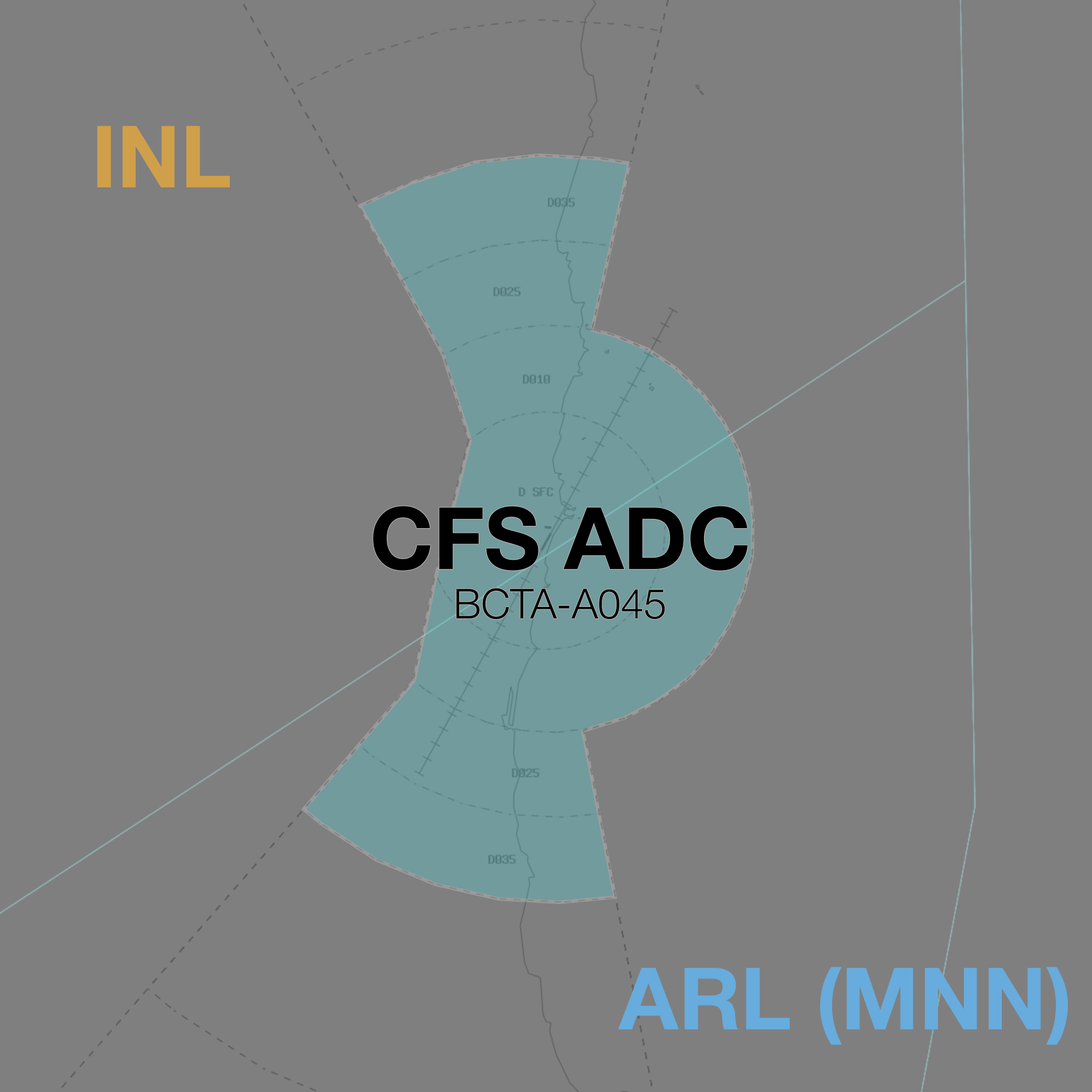
<style>
.page{position:relative;width:1092px;height:1092px;background:#7f7f7f}
.page>*{position:absolute;margin:0}
.t1{font:86.2px "HelveticaNeue-Bold";color:#d09f4a}
.t2{font:41.4px "HelveticaNeue-Light";color:#000000}
.t3{font:86.2px "HelveticaNeue-Bold";color:#000000}
.t4{font:86.2px "HelveticaNeue-Bold";color:#67acdc}
</style>
<div class="page">
<p class="t1" style="left:97px;top:126px;width:133px;height:61px">INL</p>
<p class="t2" style="left:373px;top:506px;width:375px;height:114px;text-align:center"><span class="t3">CFS ADC<br></span>BCTA-A045</p>
<p class="t4" style="left:618px;top:967px;width:450px;height:78px">ARL (MNN)</p>
</div>
